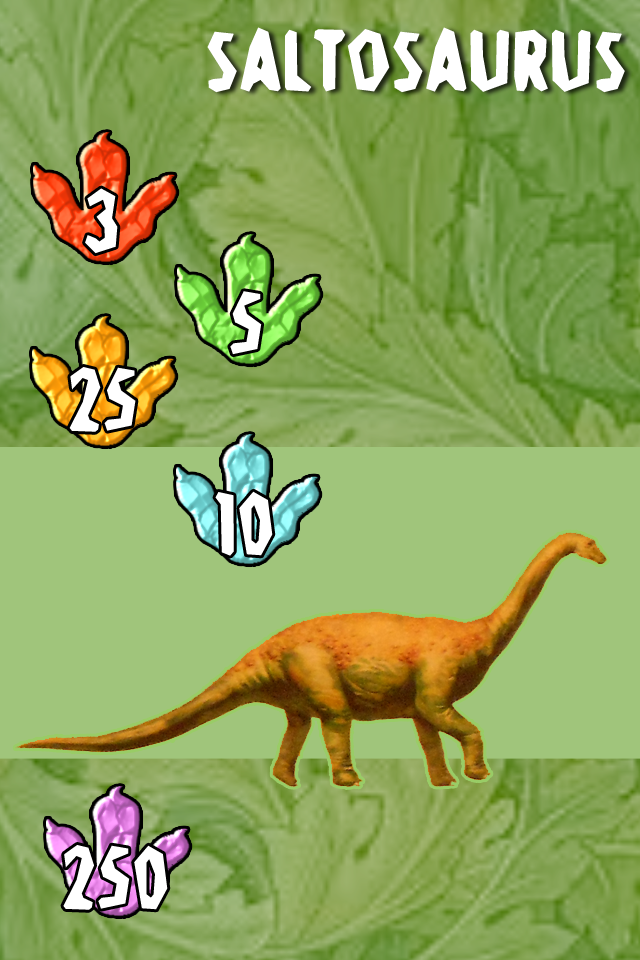
<style>
.page{position:relative;width:640px;height:960px;background:#a0c57b}
.page>*{position:absolute;margin:0}
.t1{font:96px "Stone-Age";color:#ffffff}
</style>
<div class="page">
<p class="t1" style="left:207px;top:27px;width:418px;height:66px">Saltosaurus</p>
<p class="t1" style="left:85px;top:188px;width:33px;height:66px">3</p>
<p class="t1" style="left:230px;top:291px;width:32px;height:64px">5</p>
<p class="t1" style="left:69px;top:367px;width:67px;height:65px">25</p>
<p class="t1" style="left:215px;top:491px;width:58px;height:65px">10</p>
<p class="t1" style="left:63px;top:845px;width:105px;height:65px">250</p>
</div>
